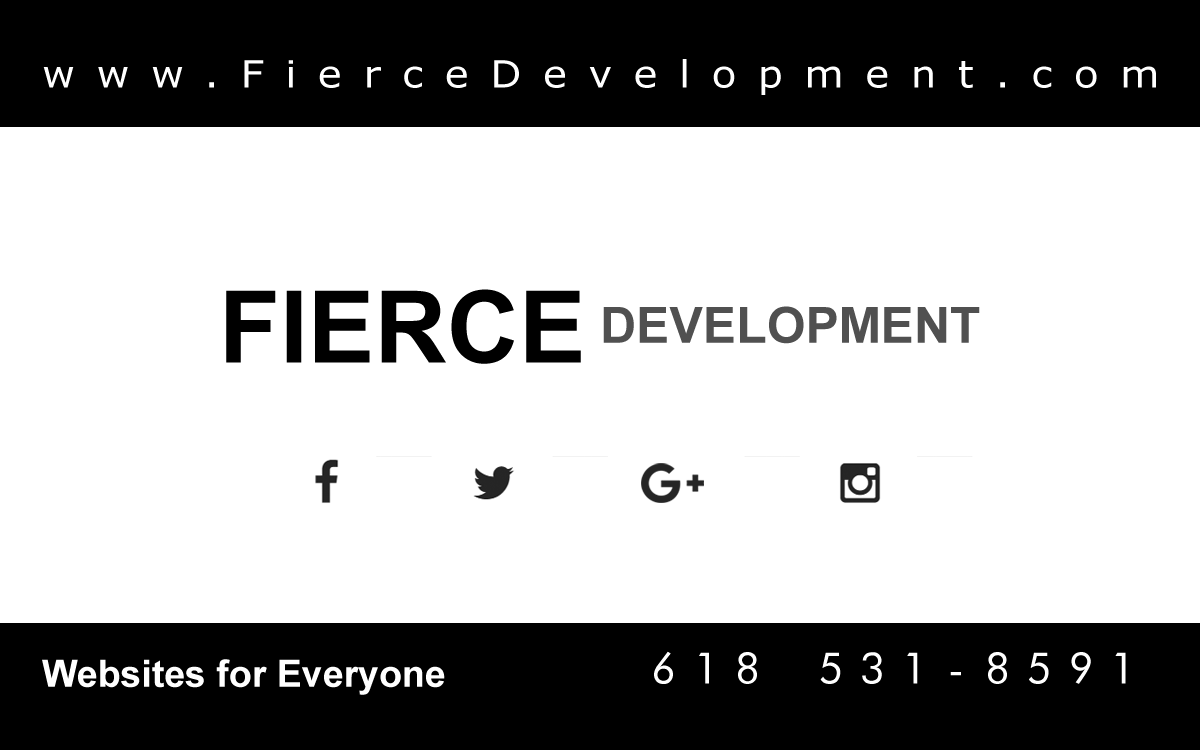
<style>
.page{position:relative;width:1200px;height:750px;background:#ffffff}
.page>*{position:absolute;margin:0}
.t1{font:37.5px "Verdana";letter-spacing:0.54em;color:#ffffff;scale:1.07 1}
.t2{font:100px "Arial-BoldMT";color:#000000}
.t3{font:50px "Arial-BoldMT";color:#505050}
.t4{font:41.7px "FuturistFixedWidth-Regular";color:#ffffff}
.t5{font:37.5px "Arial-BoldMT";color:#ffffff}
</style>
<div class="page">
<p class="t1" style="left:43px;top:59px;width:1113px;height:36px">www.FierceDevelopment.com</p>
<p class="t2" style="left:226px;top:289px;width:355px;height:75px">FIERCE</p>
<p class="t3" style="left:603px;top:306px;width:377px;height:38px">DEVELOPMENT</p>
<p class="t4" style="left:654px;top:651px;width:472px;height:33px">618 531-8591</p>
<p class="t5" style="left:42px;top:659px;width:403px;height:36px">Websites for Everyone</p>
</div>
